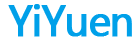
<style>
.page{position:relative;width:140px;height:40px;background:#ffffff}
.page>*{position:absolute;margin:0}
.t1{font:40px "MicrosoftYaHei";letter-spacing:-0.05em;color:#00a0e9;font-weight:bold}
</style>
<div class="page">
<p class="t1" style="left:8px;top:4px;width:124px;height:33px">YiYuen</p>
</div>
